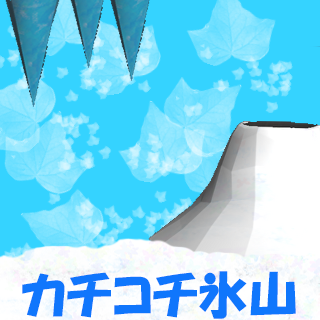
<style>
.page{position:relative;width:320px;height:320px;background:#35d3ff}
.page>*{position:absolute;margin:0}
.t1{font:50px "HGPSoeiKakupoptai";color:#1076fc}
</style>
<div class="page">
<p class="t1" style="left:22px;top:271px;width:274px;height:48px">カチコチ氷山</p>
</div>
